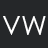
<style>
.page{position:relative;width:48px;height:48px;background:#252729}
.page>*{position:absolute;margin:0}
.t1{font:26.9px "CenturyGothic";color:#ffffff}
</style>
<div class="page">
<p class="t1" style="left:3px;top:16px;width:43px;height:19px">VW</p>
</div>
